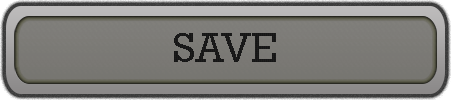
<style>
.page{position:relative;width:451px;height:100px}
.page>*{position:absolute;margin:0}
.t1{font:41.7px "Rockwell";color:#1a1a1a}
</style>
<div class="page">
<p class="t1" style="left:174px;top:33px;width:102px;height:29px">SAVE</p>
</div>
